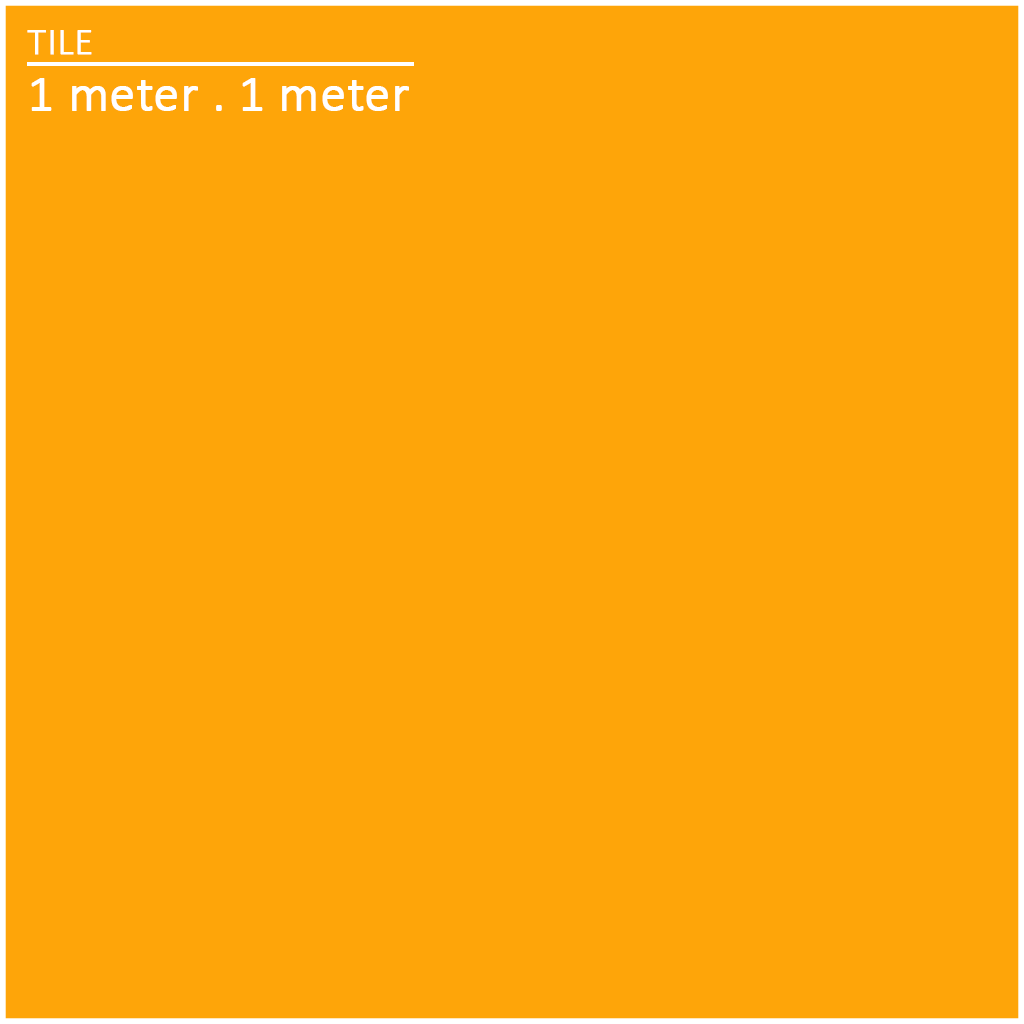
<style>
.page{position:relative;width:1024px;height:1024px;background:#fea509}
.page>*{position:absolute;margin:0}
.t1{font:37.5px "Calibri-Light";color:#ffffff;font-weight:bold}
.t2{font:51px "Calibri-Light";color:#ffffff;font-weight:bold}
</style>
<div class="page">
<p class="t1" style="left:27px;top:30px;width:65px;height:25px">TILE</p>
<p class="t2" style="left:31px;top:78px;width:378px;height:33px">1 meter . 1 meter</p>
</div>
